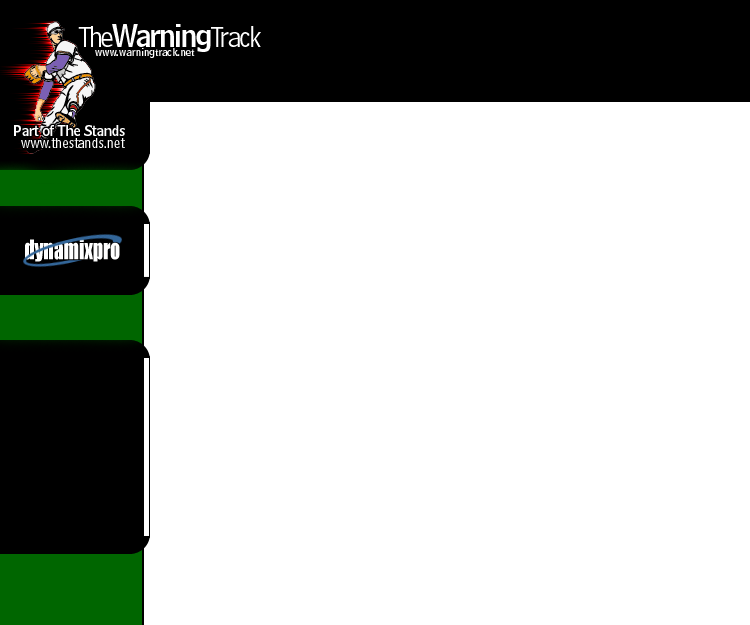
<style>
.page{position:relative;width:750px;height:625px;background:#ffffff}
.page>*{position:absolute;margin:0}
.t1{font:30px "BellCentennial-NameAndNumber";letter-spacing:-0.06em;color:#ffffff}
.t2{font:30px "BellCentennial-Address";letter-spacing:-0.06em;color:#ffffff}
.t3{font:10px "BellCentennial-NameAndNumber";color:#ffffff}
.t4{font:15px "BellCentennial-NameAndNumber";letter-spacing:-0.04em;color:#ffffff}
.t5{font:15px "BellCentennial-SubCaption";letter-spacing:-0.04em;color:#ffffff}
</style>
<div class="page">
<p class="t1" style="left:78px;top:24px;width:183px;height:28px"><span class="t2">The</span>Warning<span class="t2">Track</span></p>
<p class="t3" style="left:95px;top:48px;width:100px;height:10px">www.warningtrack.net</p>
<p class="t4" style="left:14px;top:125px;width:111px;height:11px">Part of The Stands</p>
<p class="t5" style="left:21px;top:138px;width:104px;height:10px">www.thestands.net</p>
</div>
